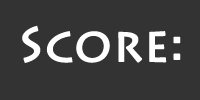
<style>
.page{position:relative;width:200px;height:100px;background:#333333}
.page>*{position:absolute;margin:0}
.t1{font:48px "LithosPro-Regular";color:#ffffff;font-weight:bold}
</style>
<div class="page">
<p class="t1" style="left:22px;top:25px;width:159px;height:38px">Score:</p>
</div>
